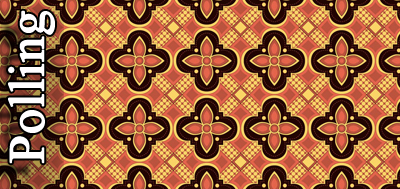
<style>
.page{position:relative;width:400px;height:189px}
.page>*{position:absolute;margin:0}
.t1{font:50px "TimesNewRomanPSMT";color:#fffeff;font-weight:bold}
</style>
<div class="page">
<p class="t1" style="left:8px;top:10px;width:47px;height:154px;rotate:-90deg">Polling</p>
</div>
